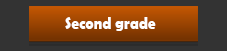
<style>
.page{position:relative;width:227px;height:51px;background:#333333}
.page>*{position:absolute;margin:0}
.t1{font:18.2px "BerlinSansFBDemi-Bold";color:#ffffff;scale:0.84 1}
</style>
<div class="page">
<p class="t1" style="left:65px;top:17px;width:91px;height:14px">Second grade</p>
</div>
